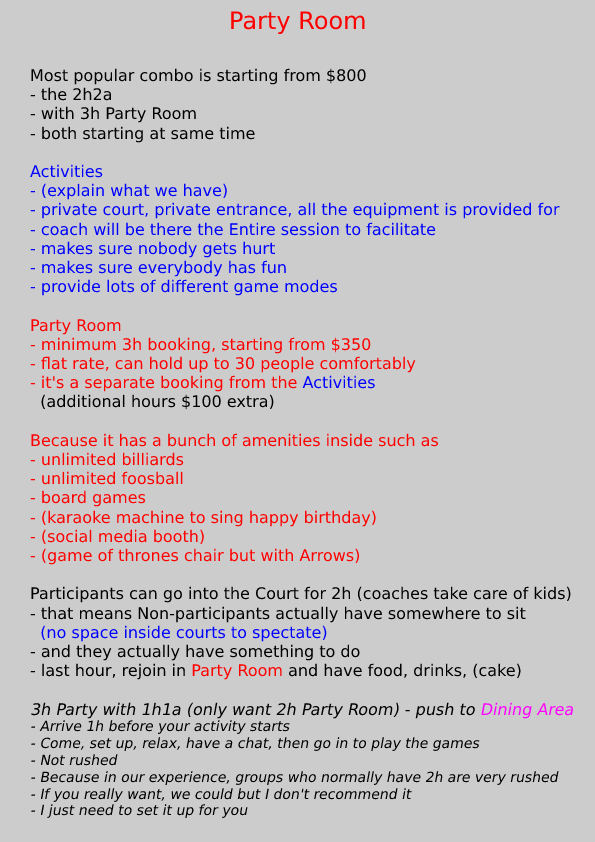
<style>
.page{position:relative;width:595px;height:842px;background:#cccccc}
.page>*{position:absolute;margin:0}
.t1{font:24px "DejaVuSans";color:#ff0000}
.t2{font:14px "DejaVuSans";color:#000000;font-style:italic}
.t3{font:16px "DejaVuSans";color:#000000}
.t4{font:16px "DejaVuSans";color:#0000ff}
.t5{font:16px "DejaVuSans";color:#ff0000}
.t6{font:16px "DejaVuSans";color:#000000;font-style:italic}
.t7{font:16px "DejaVuSans";color:#ff00ff;font-style:italic}
</style>
<div class="page">
<p class="t1" style="left:231px;top:11px;width:134px;height:23px">Party Room</p>
<p class="t2" style="left:30px;top:68px;width:544px;height:750px"><span class="t3">Most popular combo is starting from $800<br>- the 2h2a<br>- with 3h Party Room<br>- both starting at same time<br><br></span><span class="t4">Activities<br>- (explain what we have)<br>- private court, private entrance, all the equipment is provided for<br>- coach will be there the Entire session to facilitate<br>- makes sure nobody gets hurt<br>- makes sure everybody has fun<br>- provide lots of different game modes<br><br></span><span class="t5">Party Room<br>- minimum 3h booking, starting from $350<br>- flat rate, can hold up to 30 people comfortably<br>- it's a separate booking from the </span><span class="t4">Activities<br>  </span><span class="t3">(additional hours $100 extra)<br><br></span><span class="t5">Because it has a bunch of amenities inside such as<br>- unlimited billiards<br>- unlimited foosball<br>- board games<br>- (karaoke machine to sing happy birthday)<br>- (social media booth)<br>- (game of thrones chair but with Arrows)<br><br></span><span class="t3">Participants can go into the Court for 2h (coaches take care of kids)<br>- that means Non-participants actually have somewhere to sit<br>  </span><span class="t4">(no space inside courts to spectate)<br></span><span class="t3">- and they actually have something to do<br>- last hour, rejoin in </span><span class="t5">Party Room </span><span class="t3">and have food, drinks, (cake)<br><br></span><span class="t6">3h Party with 1h1a (only want 2h Party Room) - push to </span><span class="t7">Dining Area<br></span>- Arrive 1h before your activity starts<br>- Come, set up, relax, have a chat, then go in to play the games<br>- Not rushed<br>- Because in our experience, groups who normally have 2h are very rushed<br>- If you really want, we could but I don't recommend it<br>- I just need to set it up for you</p>
</div>
